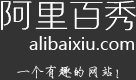
<style>
.page{position:relative;width:136px;height:80px;background:#333333}
.page>*{position:absolute;margin:0}
.t1{font:34px "huxiaobo-meixin";color:#ffffff}
.t2{font:17px "MicrosoftYaHei";color:#ffffff}
.t3{font:14px "HYi3gj";color:#ffffff}
</style>
<div class="page">
<p class="t1" style="left:1px;top:0px;width:135px;height:31px">阿里百秀</p>
<p class="t1" style="left:1px;top:0px;width:135px;height:31px">阿里百秀</p>
<p class="t2" style="left:29px;top:36px;width:105px;height:14px">alibaixiu.com</p>
<p class="t3" style="left:17px;top:65px;width:102px;height:14px">一个有趣的网站！</p>
</div>
